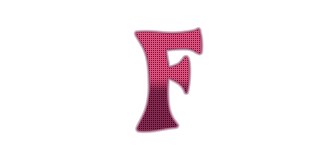
<style>
.page{position:relative;width:336px;height:164px;background:#ffffff}
.page>*{position:absolute;margin:0}
.t1{font:158px "CelestiaReduxMedium"}
</style>
<div class="page">
<p class="t1" style="left:136px;top:29px;width:65px;height:102px">F</p>
</div>
